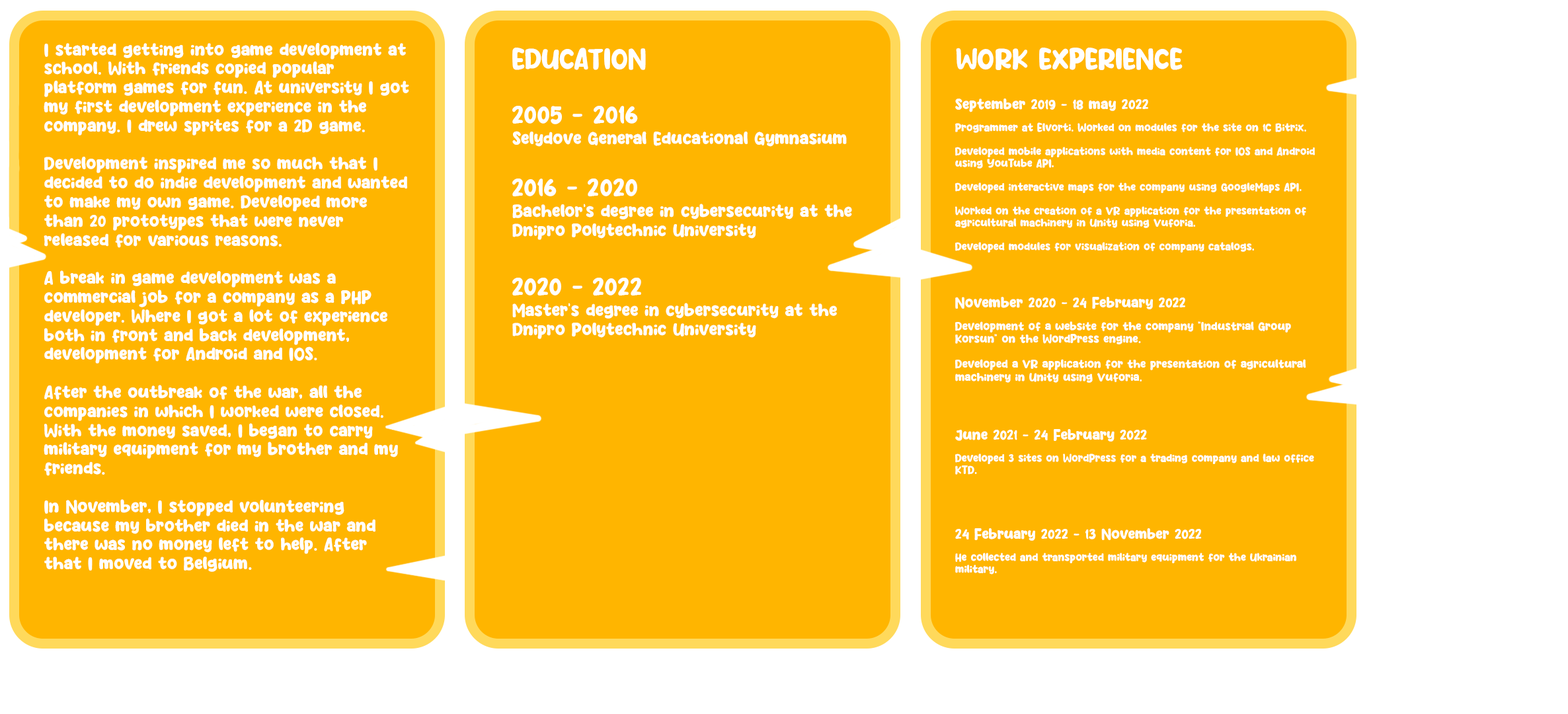
<style>
.page{position:relative;width:1568px;height:714px;background:#ffb500}
.page>*{position:absolute;margin:0}
.t1{font:15.9px "Purple-Smile";color:#ffffff}
.t2{font:24.9px "Purple-Smile";color:#ffffff}
.t3{font:13.2px "Purple-Smile";color:#ffffff}
.t4{font:24.1px "Purple-Smile";color:#ffffff}
.t5{font:9.9px "Purple-Smile";color:#ffffff}
.t6{font:10.6px "Purple-Smile";color:#ffffff}
</style>
<div class="page">
<p class="t1" style="left:44px;top:43px;width:365px;height:529px">I started getting into game development at school. With friends copied popular platform games for fun. At university I got my first development experience in the company. I drew sprites for a 2D game. <br><br>Development inspired me so much that I decided to do indie development and wanted to make my own game. Developed more than 20 prototypes that were never released for various reasons. <br><br>A break in game development was a commercial job for a company as a PHP developer. Where I got a lot of experience both in front and back development, development for Android and IOS. <br><br>After the outbreak of the war, all the companies in which I worked were closed. With the money saved, I began to carry military equipment for my brother and my friends. <br><br>In November, I stopped volunteering because my brother died in the war and there was no money left to help. After that I moved to Belgium.</p>
<p class="t2" style="left:512px;top:48px;width:134px;height:22px">EDUCATION</p>
<p class="t2" style="left:956px;top:48px;width:227px;height:22px">WORK EXPERIENCE</p>
<p class="t3" style="left:955px;top:98px;width:193px;height:14px">September 2019 - 18 may 2022</p>
<p class="t4" style="left:512px;top:106px;width:126px;height:18px">2005 - 2016</p>
<p class="t5" style="left:955px;top:122px;width:360px;height:131px">Programmer at Elvorti. Worked on modules for the site on 1C Bitrix. <br><br>Developed mobile applications with media content for IOS and Android using YouTube API. <br><br>Developed interactive maps for the company using GoogleMaps API. <br><br>Worked on the creation of a VR application for the presentation of agricultural machinery in Unity using Vuforia. <br><br>Developed modules for visualization of company catalogs.</p>
<p class="t1" style="left:512px;top:131px;width:335px;height:16px">Selydove General Educational Gymnasium</p>
<p class="t4" style="left:512px;top:178px;width:125px;height:18px">2016 - 2020</p>
<p class="t1" style="left:512px;top:204px;width:340px;height:36px">Bachelor's degree in cybersecurity at the <br>Dnipro Polytechnic University</p>
<p class="t4" style="left:512px;top:278px;width:129px;height:17px">2020 - 2022</p>
<p class="t1" style="left:512px;top:303px;width:325px;height:36px">Master's degree in cybersecurity at the <br>Dnipro Polytechnic University</p>
<p class="t3" style="left:955px;top:297px;width:230px;height:12px">November 2020 - 24 February 2022</p>
<p class="t6" style="left:955px;top:321px;width:351px;height:62px">Development of a website for the company "Industrial Group Korsun" on the WordPress engine. <br><br>Developed a VR application for the presentation of agricultural machinery in Unity using Vuforia.</p>
<p class="t3" style="left:955px;top:429px;width:192px;height:13px">June 2021 - 24 February 2022</p>
<p class="t5" style="left:955px;top:453px;width:359px;height:22px">Developed 3 sites on WordPress for a trading company and law office KTD.</p>
<p class="t3" style="left:955px;top:528px;width:247px;height:13px">24 February 2022 - 13 November 2022</p>
<p class="t5" style="left:955px;top:553px;width:341px;height:21px">He collected and transported military equipment for the Ukrainian military.</p>
</div>
